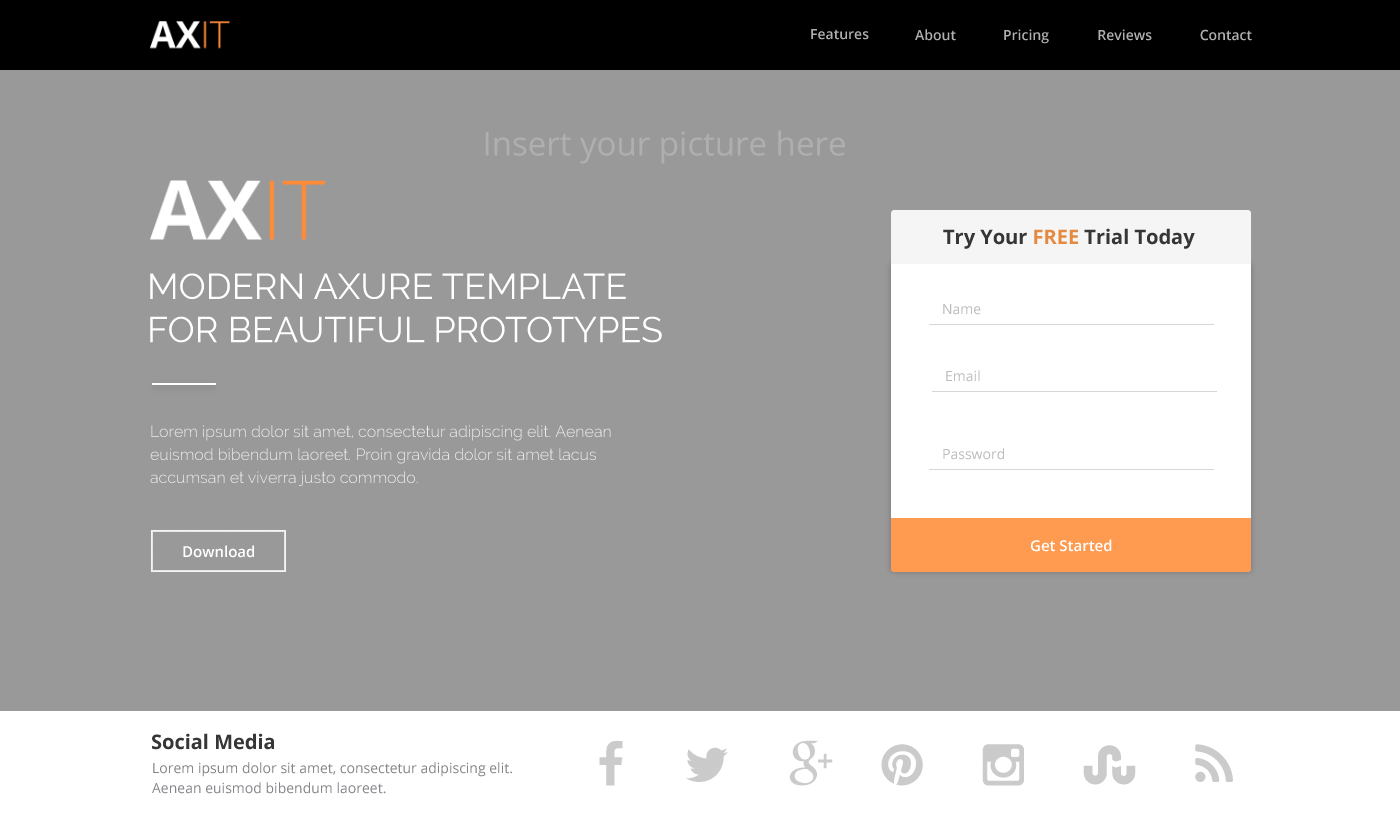
<style>
.page{position:relative;width:1400px;height:816px;background:#999999}
.page>*{position:absolute;margin:0}
.t1{font:14px "OpenSans-Semibold";color:#b0b0b0}
.t2{font:33px "OpenSans";color:#afafaf}
.t3{font:20px "OpenSans-Bold";color:#363636}
.t4{font:20px "OpenSans-Bold";color:#e58a40}
.t5{font:36px "Raleway";color:#ffffff}
.t6{font:14px "OpenSans";color:#bcbcbc}
.t7{font:16px/23px "Raleway-Light";color:#ebebeb}
.t8{font:15px "OpenSans-Semibold";color:#ffffff}
.t9{font:14px/20px "OpenSans";color:#85868a}
</style>
<div class="page">
<p class="t1" style="left:811px;top:29px;width:58px;height:11px">Features</p>
<p class="t1" style="left:915px;top:29px;width:41px;height:12px">About</p>
<p class="t1" style="left:1004px;top:29px;width:45px;height:15px">Pricing</p>
<p class="t1" style="left:1098px;top:29px;width:54px;height:12px">Reviews</p>
<p class="t1" style="left:1200px;top:29px;width:52px;height:12px">Contact</p>
<p class="t2" style="left:485px;top:130px;width:360px;height:34px">Insert your picture here</p>
<p class="t3" style="left:943px;top:228px;width:252px;height:21px">Try Your <span class="t4">FREE</span> Trial Today</p>
<p class="t5" style="left:150px;top:273px;width:512px;height:70px">MODERN AXURE TEMPLATE<br>FOR BEAUTIFUL PROTOTYPES</p>
<p class="t6" style="left:943px;top:304px;width:38px;height:11px">Name</p>
<p class="t6" style="left:946px;top:370px;width:34px;height:12px">Email</p>
<p class="t7" style="left:150px;top:425px;width:461px;height:61px">Lorem ipsum dolor sit amet, consectetur adipiscing elit. Aenean<br>euismod bibendum laoreet. Proin gravida dolor sit amet lacus<br>accumsan et viverra justo commodo.</p>
<p class="t6" style="left:943px;top:448px;width:61px;height:12px">Password</p>
<p class="t8" style="left:183px;top:545px;width:71px;height:13px">Download</p>
<p class="t8" style="left:1031px;top:539px;width:81px;height:13px">Get Started</p>
<p class="t3" style="left:152px;top:733px;width:122px;height:17px">Social Media</p>
<p class="t9" style="left:152px;top:762px;width:360px;height:32px">Lorem ipsum dolor sit amet, consectetur adipiscing elit. <br>Aenean euismod bibendum laoreet.</p>
</div>
